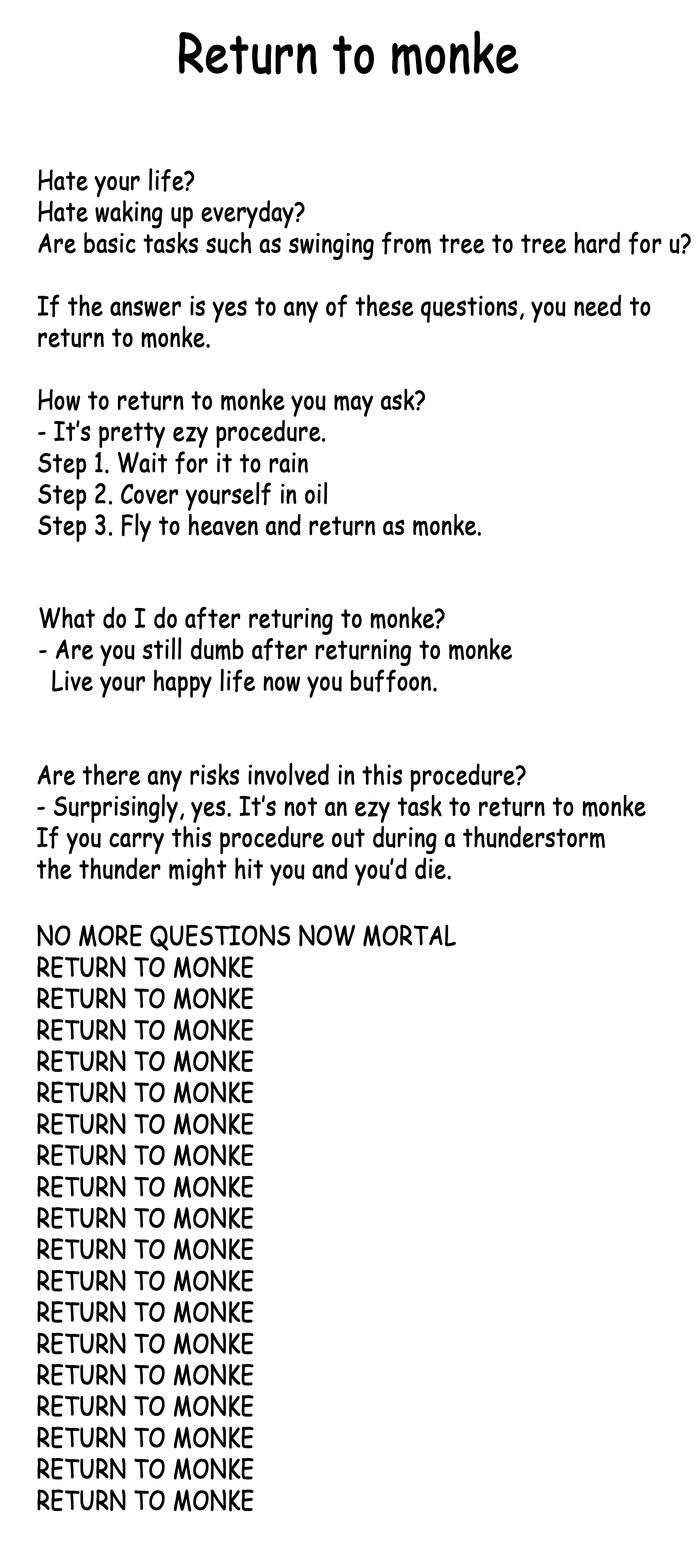
<style>
.page{position:relative;width:697px;height:1568px;background:#ffffff}
.page>*{position:absolute;margin:0}
.t1{font:52.3px "ComicSansMS";color:#000000;font-weight:bold;scale:0.81 1}
.t2{font:26.1px "ComicSansMS";color:#000000;font-weight:bold;scale:0.81 1}
</style>
<div class="page">
<p class="t1" style="left:179px;top:30px;width:339px;height:46px">Return to monke</p>
<p class="t2" style="left:38px;top:168px;width:653px;height:374px">Hate your life?<br>Hate waking up everyday?<br>Are basic tasks such as swinging from tree to tree hard for u?<br><br>If the answer is yes to any of these questions, you need to <br>return to monke.<br><br>How to return to monke you may ask?<br>- It’s pretty ezy procedure. <br>Step 1. Wait for it to rain<br>Step 2. Cover yourself in oil<br>Step 3. Fly to heaven and return as monke.</p>
<p class="t2" style="left:39px;top:607px;width:473px;height:91px">What do I do after returing to monke?<br>- Are you still dumb after returning to monke<br> Live your happy life now you buffoon.</p>
<p class="t2" style="left:37px;top:763px;width:609px;height:123px">Are there any risks involved in this procedure?<br>- Surprisingly, yes. It’s not an ezy task to return to monke<br>If you carry this procedure out during a thunderstorm<br>the thunder might hit you and you’d die.</p>
<p class="t2" style="left:37px;top:925px;width:419px;height:586px">NO MORE QUESTIONS NOW MORTAL<br>RETURN TO MONKE<br>RETURN TO MONKE<br>RETURN TO MONKE<br>RETURN TO MONKE<br>RETURN TO MONKE<br>RETURN TO MONKE<br>RETURN TO MONKE<br>RETURN TO MONKE<br>RETURN TO MONKE<br>RETURN TO MONKE<br>RETURN TO MONKE<br>RETURN TO MONKE<br>RETURN TO MONKE<br>RETURN TO MONKE<br>RETURN TO MONKE<br>RETURN TO MONKE<br>RETURN TO MONKE<br>RETURN TO MONKE</p>
</div>
